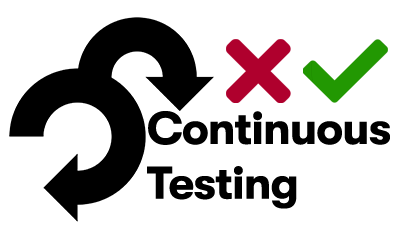
<style>
.page{position:relative;width:400px;height:250px;background:#ffffff}
.page>*{position:absolute;margin:0}
.t1{font:45.6px "GTWalsheim-Bold";letter-spacing:-0.02em;color:#000000}
</style>
<div class="page">
<p class="t1" style="left:147px;top:111px;width:243px;height:98px">Continuous<br>Testing</p>
</div>
